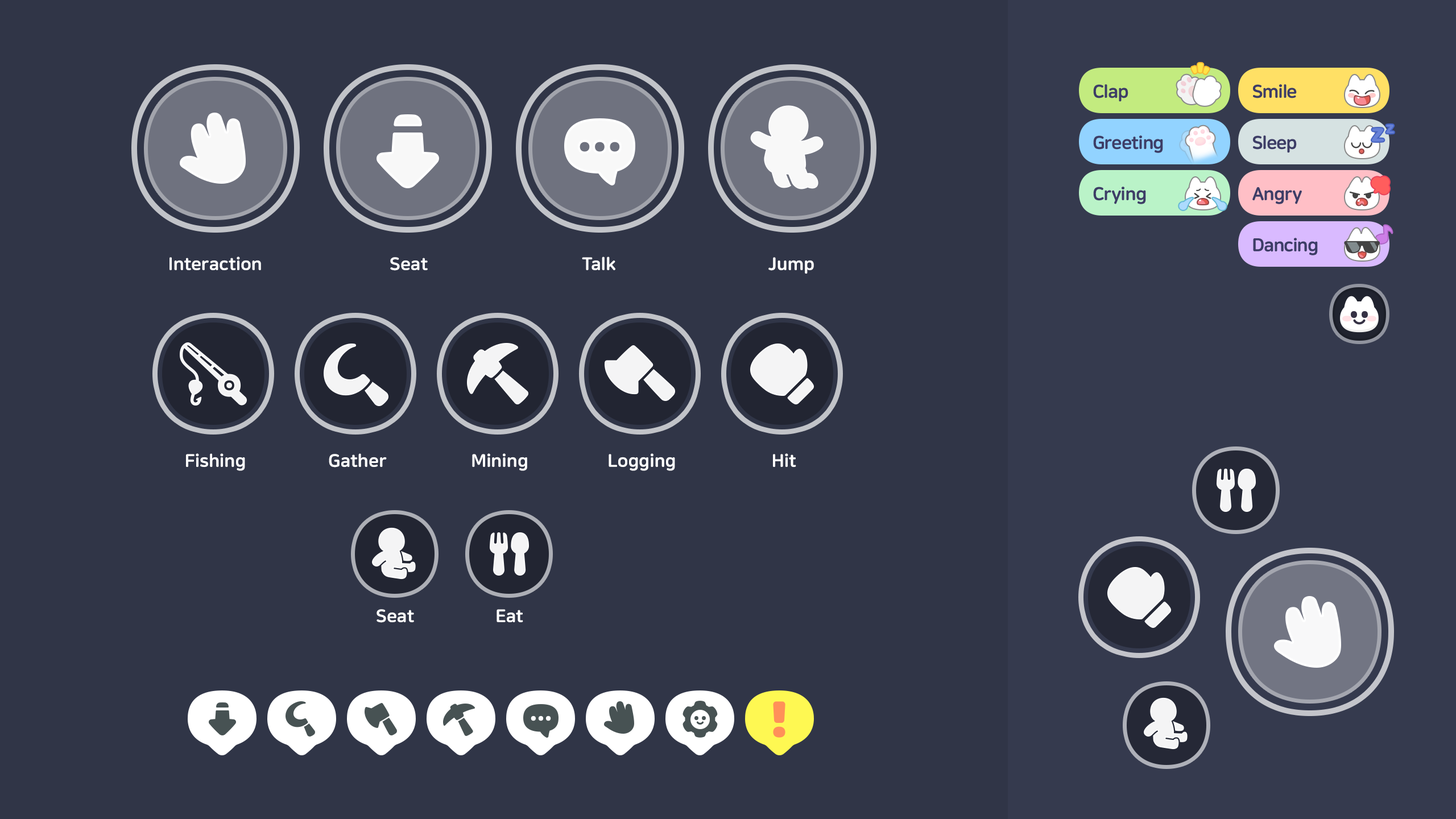
<style>
.page{position:relative;width:1456px;height:819px;background:#303547}
.page>*{position:absolute;margin:0}
.t1{font:18.2px "NanumSquareRoundEB";letter-spacing:-0.025em;color:#3d3d66}
.t2{font:17.8px "NanumSquareRoundOTFEB";color:#ffffff}
</style>
<div class="page">
<p class="t1" style="left:1093px;top:84px;width:35px;height:18px">Clap</p>
<p class="t1" style="left:1253px;top:84px;width:44px;height:14px">Smile</p>
<p class="t1" style="left:1093px;top:135px;width:70px;height:18px">Greeting</p>
<p class="t1" style="left:1253px;top:135px;width:44px;height:18px">Sleep</p>
<p class="t1" style="left:1093px;top:187px;width:53px;height:17px">Crying</p>
<p class="t1" style="left:1252px;top:187px;width:50px;height:17px">Angry</p>
<p class="t1" style="left:1253px;top:238px;width:65px;height:17px">Dancing</p>
<p class="t2" style="left:169px;top:257px;width:92px;height:14px">Interaction</p>
<p class="t2" style="left:390px;top:257px;width:38px;height:14px">Seat</p>
<p class="t2" style="left:582px;top:257px;width:33px;height:14px">Talk</p>
<p class="t2" style="left:768px;top:257px;width:46px;height:17px">Jump</p>
<p class="t2" style="left:186px;top:453px;width:59px;height:18px">Fishing</p>
<p class="t2" style="left:329px;top:453px;width:58px;height:15px">Gather</p>
<p class="t2" style="left:472px;top:453px;width:55px;height:18px">Mining</p>
<p class="t2" style="left:609px;top:453px;width:66px;height:18px">Logging</p>
<p class="t2" style="left:773px;top:453px;width:23px;height:15px">Hit</p>
<p class="t2" style="left:377px;top:609px;width:37px;height:14px">Seat</p>
<p class="t2" style="left:497px;top:609px;width:26px;height:14px">Eat</p>
</div>
